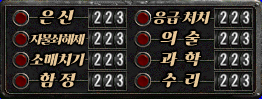
<style>
.page{position:relative;width:262px;height:99px}
.page>*{position:absolute;margin:0}
.t1{font:16px "ghanachoco";color:#e8c898;font-style:italic}
.t2{font:14px "ghanachoco";letter-spacing:-0.02em;color:#e8c898;font-style:italic}
.t3{font:12px "ghanachoco";letter-spacing:-0.15em;color:#e8c898;font-style:italic}
.t4{font:14px "ghanachoco";color:#e8c898;font-style:italic}
</style>
<div class="page">
<p class="t1" style="left:39px;top:9px;width:35px;height:16px">은 신</p>
<p class="t2" style="left:153px;top:11px;width:58px;height:13px">응급 처치</p>
<p class="t1" style="left:160px;top:30px;width:40px;height:16px">의  술</p>
<p class="t3" style="left:29px;top:33px;width:57px;height:12px">자물쇠 해제</p>
<p class="t4" style="left:30px;top:53px;width:55px;height:13px">소매치기</p>
<p class="t1" style="left:160px;top:51px;width:41px;height:16px">과  학</p>
<p class="t1" style="left:40px;top:72px;width:36px;height:16px">함 정</p>
<p class="t1" style="left:162px;top:73px;width:38px;height:15px">수  리</p>
</div>
